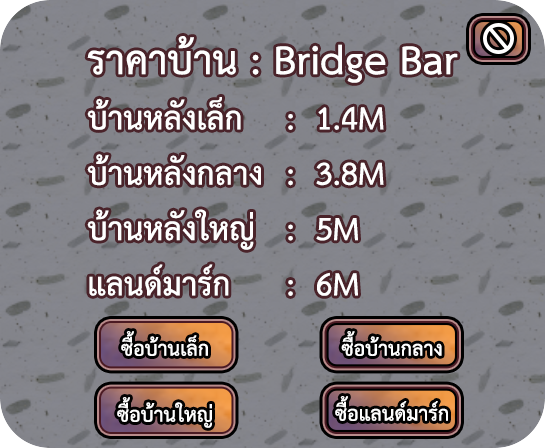
<style>
.page{position:relative;width:545px;height:448px}
.page>*{position:absolute;margin:0}
.t1{font:46.1px "THSarabunPSK-Bold";color:#ffffff}
.t2{font:57.6px "THSarabunPSK-Bold";color:#ffffff}
.t3{font:29.2px "THSarabunPSK-Bold";color:#ffffff}
</style>
<div class="page">
<p class="t1" style="left:87px;top:36px;width:371px;height:260px;text-align:center"><span class="t2">ราคาบ้าน : Bridge Bar</span><br>  บ้านหลังเล็ก  :  1.4M<br>  บ้านหลังกลาง :  3.8M<br>  บ้านหลังใหญ่ :  5M<br>  แลนด์มาร์ก  :  6M</p>
<p class="t3" style="left:121px;top:331px;width:87px;height:25px">ซื้อบ้านเล็ก</p>
<p class="t3" style="left:341px;top:331px;width:101px;height:25px">ซื้อบ้านกลาง</p>
<p class="t3" style="left:117px;top:397px;width:95px;height:31px">ซื้อบ้านใหญ่</p>
<p class="t3" style="left:335px;top:396px;width:113px;height:25px">ซื้อแลนด์มาร์ก</p>
</div>
